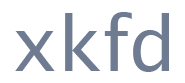
<style>
.page{position:relative;width:185px;height:83px;background:#ffffff}
.page>*{position:absolute;margin:0}
.t1{font:75px "LucidaSansUnicode";color:#6e7b91}
</style>
<div class="page">
<p class="t1" style="left:15px;top:12px;width:154px;height:60px">xkfd</p>
</div>
